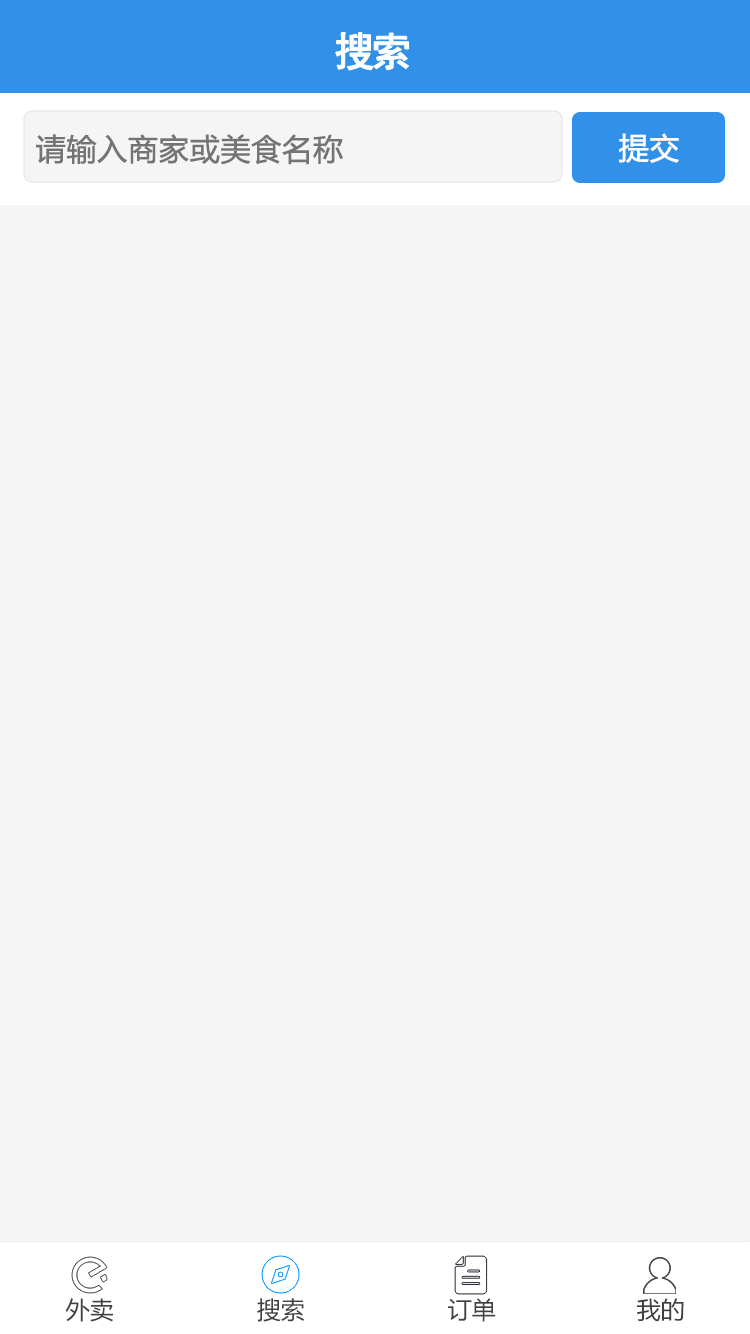
<style>
.page{position:relative;width:750px;height:1334px;background:#f5f5f5}
.page>*{position:absolute;margin:0}
.t1{font:40px "SimHei";letter-spacing:-0.1em;color:#ffffff;font-weight:bold}
.t2{font:30px "MicrosoftYaHei";color:#747474;font-weight:bold}
.t3{font:30px "MicrosoftYaHei";color:#ffffff;font-weight:bold}
.t4{font:24px "MicrosoftYaHei";color:#414141}
</style>
<div class="page">
<p class="t1" style="left:335px;top:32px;width:74px;height:38px">搜索</p>
<p class="t2" style="left:36px;top:134px;width:307px;height:31px">请输入商家或美食名称</p>
<p class="t3" style="left:619px;top:133px;width:60px;height:30px">提交</p>
<p class="t4" style="left:65px;top:1298px;width:48px;height:24px">外卖</p>
<p class="t4" style="left:257px;top:1298px;width:48px;height:24px">搜索</p>
<p class="t4" style="left:448px;top:1298px;width:48px;height:24px">订单</p>
<p class="t4" style="left:637px;top:1298px;width:47px;height:24px">我的</p>
</div>
